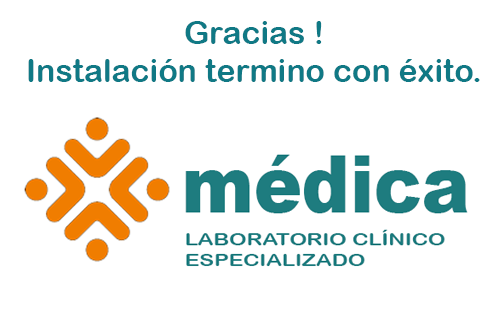
<style>
.page{position:relative;width:499px;height:312px;background:#ffffff}
.page>*{position:absolute;margin:0}
.t1{font:32.1px "ArialRoundedMTBold";color:#107985}
</style>
<div class="page">
<p class="t1" style="left:28px;top:21px;width:452px;height:61px;text-align:center">Gracias !<br>Instalación termino con éxito.</p>
</div>
